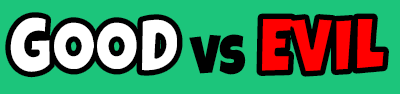
<style>
.page{position:relative;width:400px;height:94px;background:#1cc57b}
.page>*{position:absolute;margin:0}
.t1{font:77.3px "LuckiestGuy-Regular";color:#ffffff;scale:0.89 1}
.t2{font:77.3px "LuckiestGuy-Regular";color:#ff0000;scale:0.89 1}
.t3{font:56px "LuckiestGuy-Regular";color:#000000;scale:0.89 1}
</style>
<div class="page">
<p class="t1" style="left:9px;top:16px;width:170px;height:58px">GOOD</p>
<p class="t1" style="left:9px;top:16px;width:170px;height:58px">GOOD</p>
<p class="t2" style="left:260px;top:17px;width:125px;height:56px">EVIL</p>
<p class="t2" style="left:260px;top:17px;width:125px;height:56px">EVIL</p>
<p class="t3" style="left:189px;top:34px;width:57px;height:41px">vs</p>
</div>
